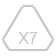
<style>
.page{position:relative;width:56px;height:56px;background:#ffffff}
.page>*{position:absolute;margin:0}
.t1{font:16px "ArialMT";color:#c8c8c8;font-variant:small-caps}
</style>
<div class="page">
<p class="t1" style="left:18px;top:32px;width:20px;height:12px">X7</p>
</div>
